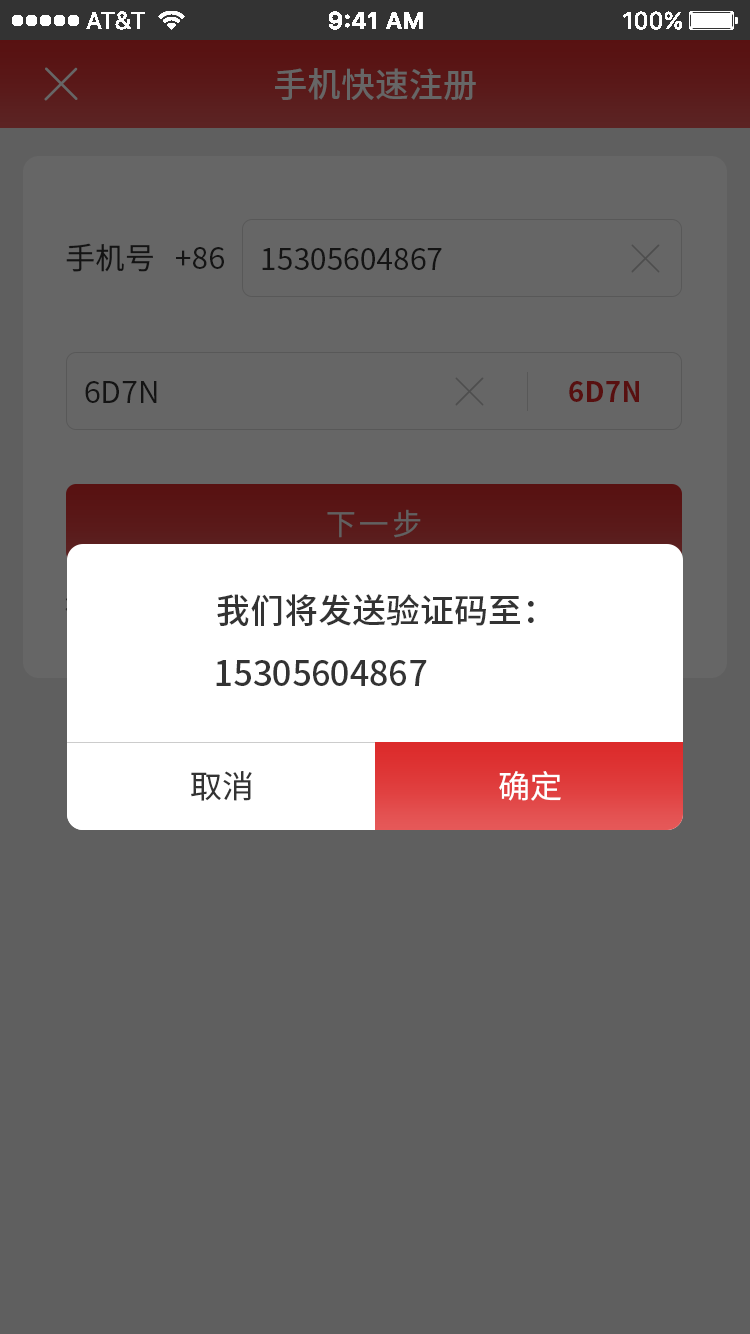
<style>
.page{position:relative;width:750px;height:1334px;background:#5f5f5f}
.page>*{position:absolute;margin:0}
.t1{font:34px "SourceHanSansCN-Medium";color:#666666}
.t2{font:30px "SourceHanSansCN-Regular";color:#141414}
.t3{font:28px "SourceHanSansCN-Bold";color:#581010}
.t4{font:30px "SourceHanSansCN-Regular";letter-spacing:0.1em;color:#616161}
.t5{font:34px "SourceHanSansCN-Medium";color:#333333}
.t6{font:32px "SourceHanSansCN-Regular";color:#333333}
.t7{font:32px "SourceHanSansCN-Regular";color:#ffffff}
</style>
<div class="page">
<p class="t1" style="left:275px;top:68px;width:201px;height:33px">手机快速注册</p>
<p class="t2" style="left:66px;top:243px;width:87px;height:29px">手机号</p>
<p class="t2" style="left:176px;top:247px;width:48px;height:22px">+86</p>
<p class="t2" style="left:262px;top:248px;width:180px;height:22px">15305604867</p>
<p class="t2" style="left:85px;top:381px;width:72px;height:22px">6D7N</p>
<p class="t3" style="left:569px;top:381px;width:70px;height:21px">6D7N</p>
<p class="t4" style="left:327px;top:509px;width:94px;height:29px">下一步</p>
<p class="t5" style="left:217px;top:594px;width:317px;height:32px">我们将发送验证码至：</p>
<p class="t5" style="left:216px;top:660px;width:211px;height:26px">15305604867</p>
<p class="t6" style="left:191px;top:771px;width:61px;height:30px">取消</p>
<p class="t7" style="left:499px;top:771px;width:62px;height:30px">确定</p>
</div>
